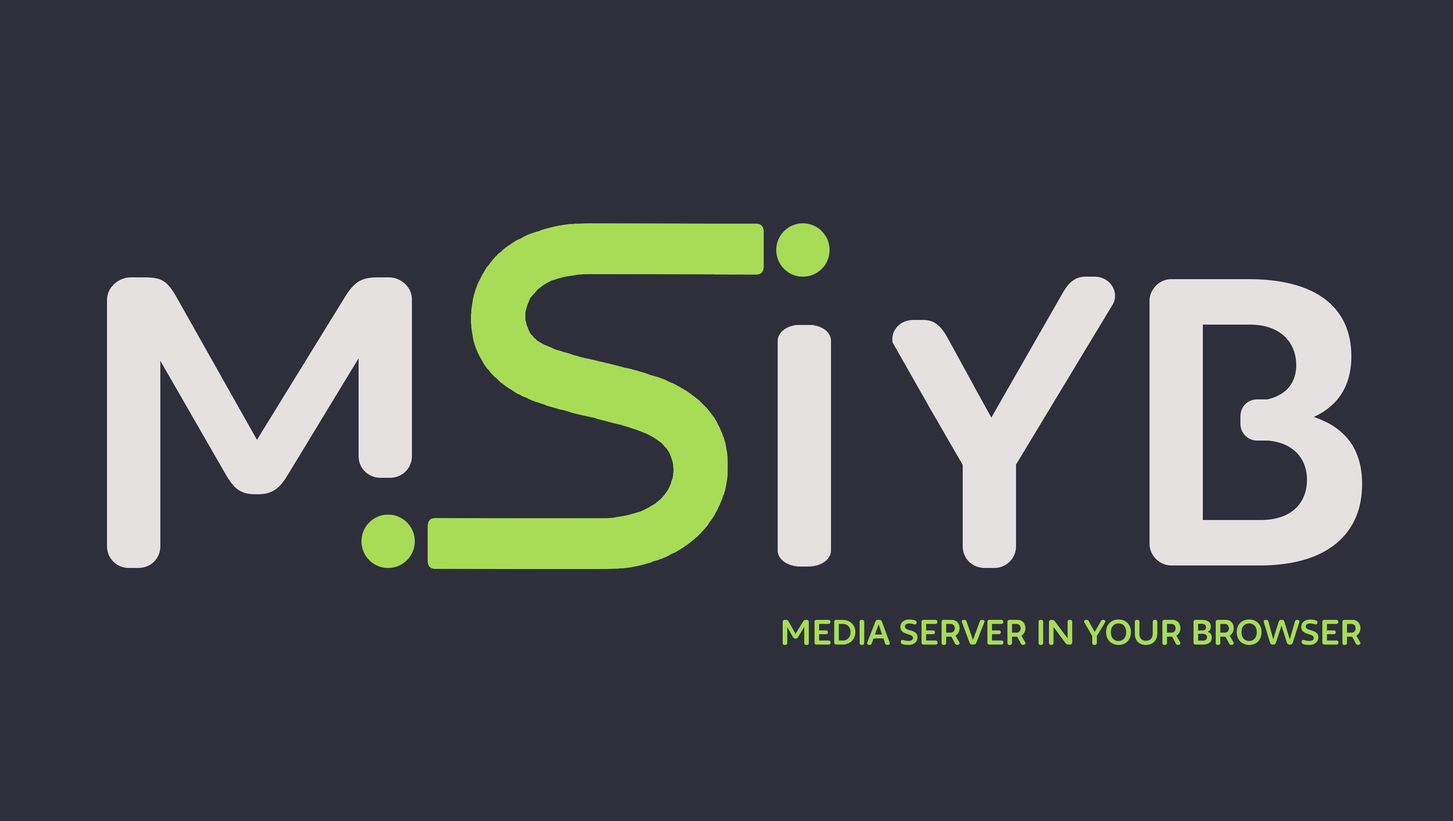
<style>
.page{position:relative;width:1453px;height:821px;background:#2e2f3b}
.page>*{position:absolute;margin:0}
.t1{font:30.7px "IrmaTextRound-Bold";color:#a8dc56}
</style>
<div class="page">
<p class="t1" style="left:783px;top:619px;width:577px;height:26px">MEDIA SERVER IN YOUR BROWSER</p>
</div>
